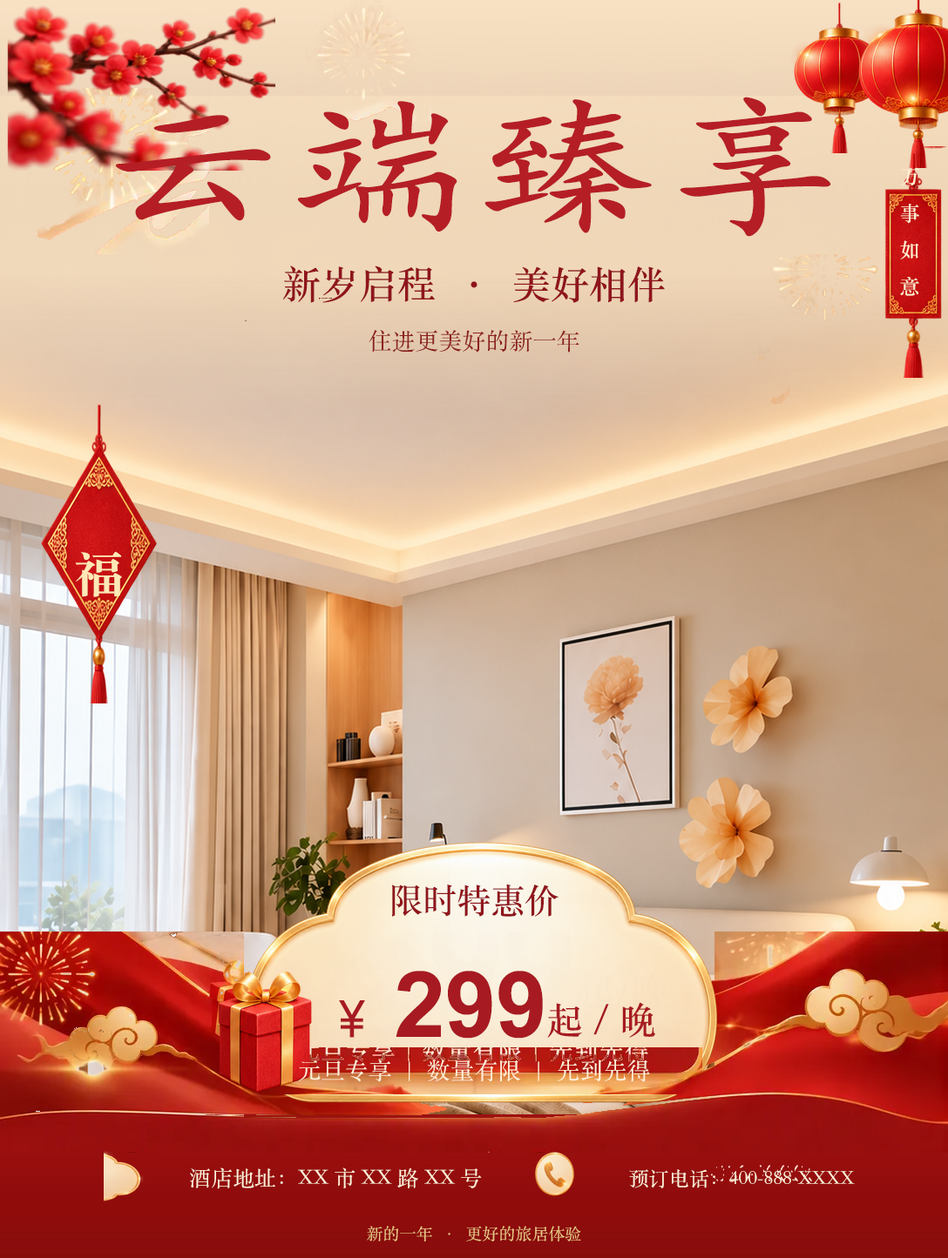
<style>
.page{position:relative;width:948px;height:1258px}
.page>*{position:absolute;margin:0}
.t1{font:151.5px "KaiTi";color:#b51e25;font-weight:bold;scale:1.2 1}
.t2{font:20px "STSongti-SC-Bold";color:#fff0d1}
.t3{font:38.3px "STSongti-SC-Bold";color:#8f151c}
.t4{font:23.5px "STSongti-SC-Regular";color:#8c211e}
.t5{font:48.8px "STSongti-SC-Black";color:#ffe8b7}
.t6{font:34px "STSongti-SC-Bold";color:#8f151c}
.t7{font:91.4px "Arial-BoldMT";color:#a71a21}
.t8{font:50.5px "AdobeHeitiStd-Regular";color:#a71a21}
.t9{font:36.6px "STSongti-SC-Bold";color:#a71a21}
.t10{font:23.5px "STSongti-SC-Regular";color:#fff0d8}
.t11{font:21.8px "STSongti-SC-Regular";color:#fff0d8}
.t12{font:20px "STSongti-SC-Regular";color:#fff0d8}
.t13{font:16.5px "STSongti-SC-Regular";color:#ebc987}
</style>
<div class="page">
<p class="t1" style="left:115px;top:97px;width:716px;height:140px">云端臻享</p>
<p class="t2" style="left:901px;top:167px;width:18px;height:19px">万</p>
<p class="t2" style="left:900px;top:204px;width:19px;height:20px">事</p>
<p class="t2" style="left:900px;top:240px;width:18px;height:20px">如</p>
<p class="t3" style="left:282px;top:266px;width:382px;height:37px">新岁启程  ·  美好相伴</p>
<p class="t2" style="left:900px;top:277px;width:19px;height:19px">意</p>
<p class="t4" style="left:368px;top:330px;width:211px;height:23px">住进更美好的新一年</p>
<p class="t5" style="left:75px;top:551px;width:47px;height:46px">福</p>
<p class="t6" style="left:392px;top:884px;width:166px;height:33px">限时特惠价</p>
<p class="t7" style="left:395px;top:971px;width:148px;height:68px">299</p>
<p class="t8" style="left:339px;top:1001px;width:26px;height:37px">￥</p>
<p class="t9" style="left:547px;top:1002px;width:108px;height:36px">起/晚</p>
<p class="t10" style="left:298px;top:1059px;width:352px;height:24px">元旦专享  |  数量有限  |  先到先得</p>
<p class="t11" style="left:190px;top:1168px;width:292px;height:22px">酒店地址：XX市XX路XX号</p>
<p class="t12" style="left:629px;top:1170px;width:225px;height:19px">预订电话：400-888-XXXX</p>
<p class="t13" style="left:367px;top:1226px;width:214px;height:16px">新的一年  ·  更好的旅居体验</p>
</div>
